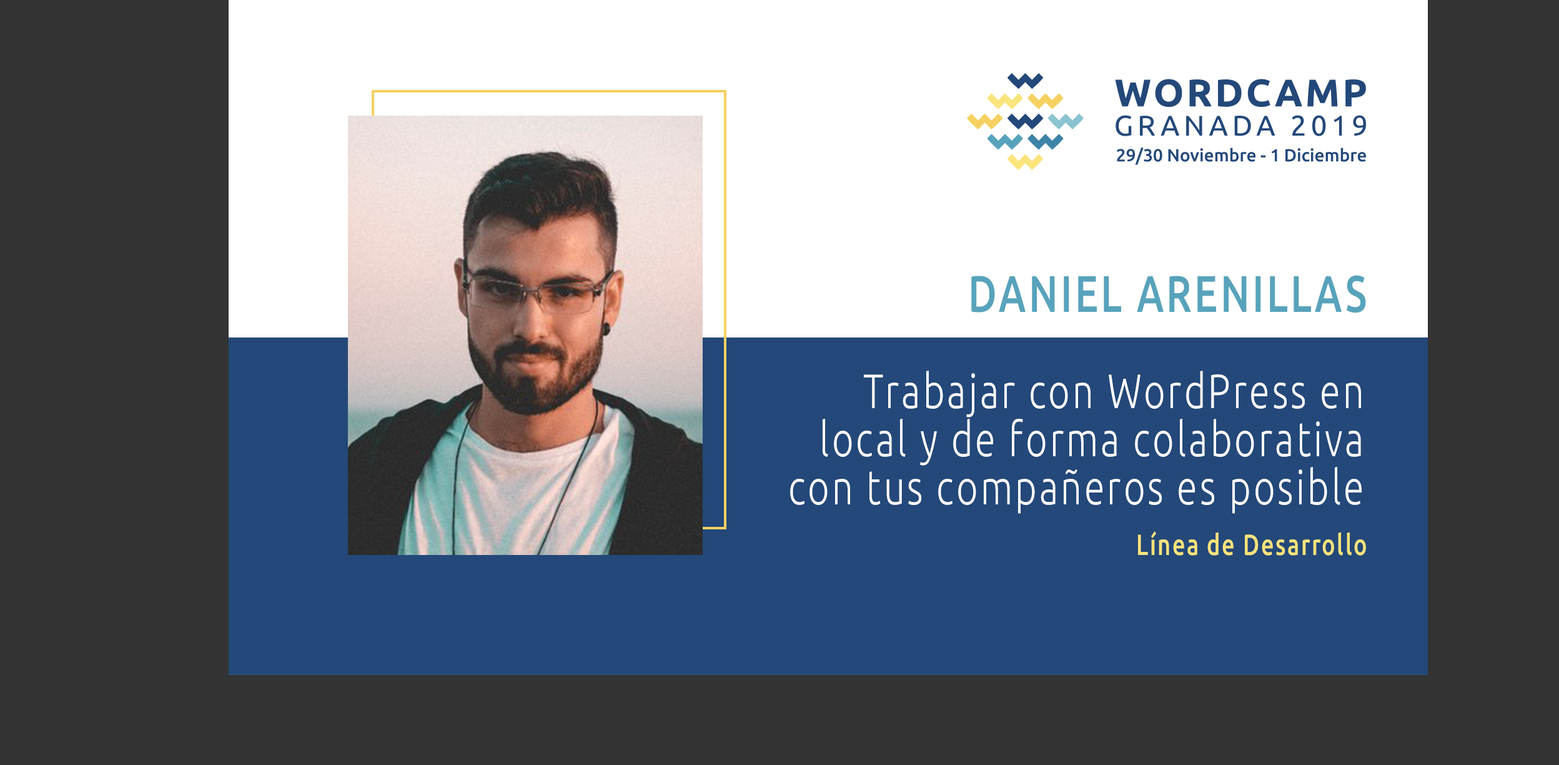
<style>
.page{position:relative;width:1559px;height:765px;background:#333333}
.page>*{position:absolute;margin:0}
.t1{font:51.4px "Ubuntu-Medium";letter-spacing:0.068em;color:#57a3bb;scale:0.77 1}
.t2{font:48.2px/48.2px "Ubuntu-Light";letter-spacing:0.068em;color:#ffffff;scale:0.77 1}
.t3{font:29.2px "Ubuntu-Medium";letter-spacing:0.068em;color:#f9e37b;scale:0.77 1}
</style>
<div class="page">
<p class="t1" style="left:971px;top:275px;width:395px;height:38px">DANIEL ARENILLAS</p>
<p class="t2" style="left:790px;top:370px;width:572px;height:144px;text-align:right">Trabajar con WordPress en local y de forma colaborativa con tus compañeros es posible</p>
<p class="t3" style="left:1138px;top:531px;width:228px;height:24px">Línea de Desarrollo</p>
</div>
